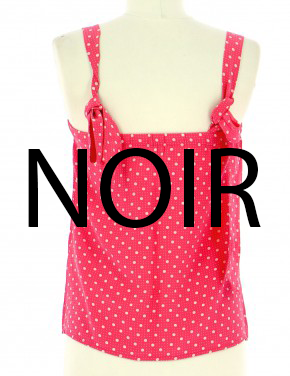
<style>
.page{position:relative;width:290px;height:376px}
.page>*{position:absolute;margin:0}
.t1{font:115px "MyriadPro-Regular";color:#000000}
</style>
<div class="page">
<p class="t1" style="left:28px;top:147px;width:233px;height:82px">NOIR</p>
</div>
